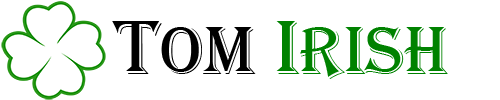
<style>
.page{position:relative;width:500px;height:100px;background:#ffffff}
.page>*{position:absolute;margin:0}
.t1{font:70px "Algerian";color:#008200}
.t2{font:80px "Algerian";color:#000000}
.t3{font:70px "Algerian";color:#000000}
.t4{font:80px "Algerian";color:#008200}
</style>
<div class="page">
<p class="t1" style="left:112px;top:21px;width:336px;height:58px"><span class="t2">T</span><span class="t3">om</span><span class="t4"> I</span>rish</p>
</div>
